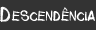
<style>
.page{position:relative;width:96px;height:30px;background:#333333}
.page>*{position:absolute;margin:0}
.t1{font:14.8px "UpperSide";letter-spacing:0.11em;color:#ffffff;scale:0.85 1}
.t2{font:22.7px "UpperSide";letter-spacing:0.11em;color:#ffffff;scale:0.85 1}
.t3{font:4.8px "UpperSide";letter-spacing:0.05em;scale:1.24 1}
</style>
<div class="page">
<p class="t1" style="left:0px;top:6px;width:95px;height:16px"><span class="t2">d</span>escendencia</p>
<p class="t3" style="left:63px;top:7px;width:5px;height:4px;rotate:180deg">v</p>
</div>
